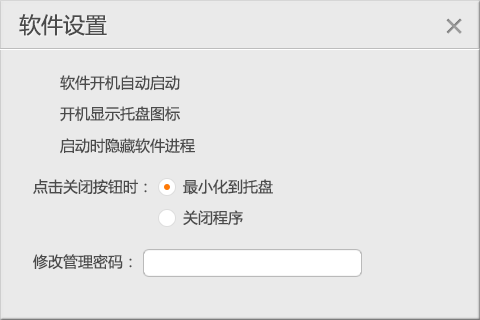
<style>
.page{position:relative;width:480px;height:320px;background:#eaeaea}
.page>*{position:absolute;margin:0}
.t1{font:22px "MicrosoftYaHei";color:#4b4b4b}
.t2{font:15px "MicrosoftYaHei";color:#4b4b4b}
</style>
<div class="page">
<p class="t1" style="left:19px;top:14px;width:88px;height:22px">软件设置</p>
<p class="t2" style="left:60px;top:75px;width:120px;height:16px">软件开机自动启动</p>
<p class="t2" style="left:60px;top:106px;width:120px;height:16px">开机显示托盘图标</p>
<p class="t2" style="left:60px;top:138px;width:135px;height:16px">启动时隐藏软件进程</p>
<p class="t2" style="left:33px;top:179px;width:114px;height:15px">点击关闭按钮时：</p>
<p class="t2" style="left:183px;top:179px;width:90px;height:16px">最小化到托盘</p>
<p class="t2" style="left:183px;top:210px;width:60px;height:16px">关闭程序</p>
<p class="t2" style="left:33px;top:254px;width:99px;height:16px">修改管理密码：</p>
</div>
